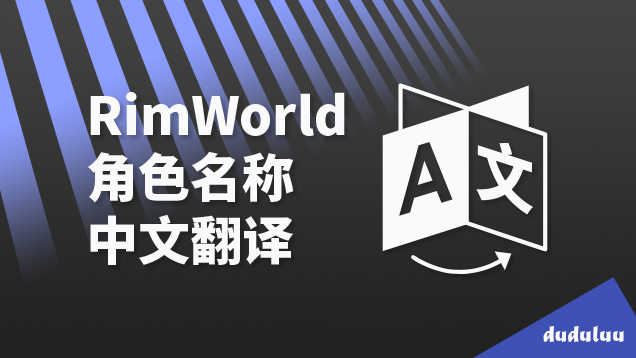
<style>
.page{position:relative;width:636px;height:358px}
.page>*{position:absolute;margin:0}
.t1{font:52px "NotoSansSC-Black";color:#fafafa}
.t2{font:24px "MaturaMTScriptCapitals";color:#fafafa}
</style>
<div class="page">
<p class="t1" style="left:88px;top:92px;width:257px;height:173px">RimWorld<br>角色名称<br>中文翻译</p>
<p class="t2" style="left:543px;top:326px;width:81px;height:16px">duduluu</p>
</div>
